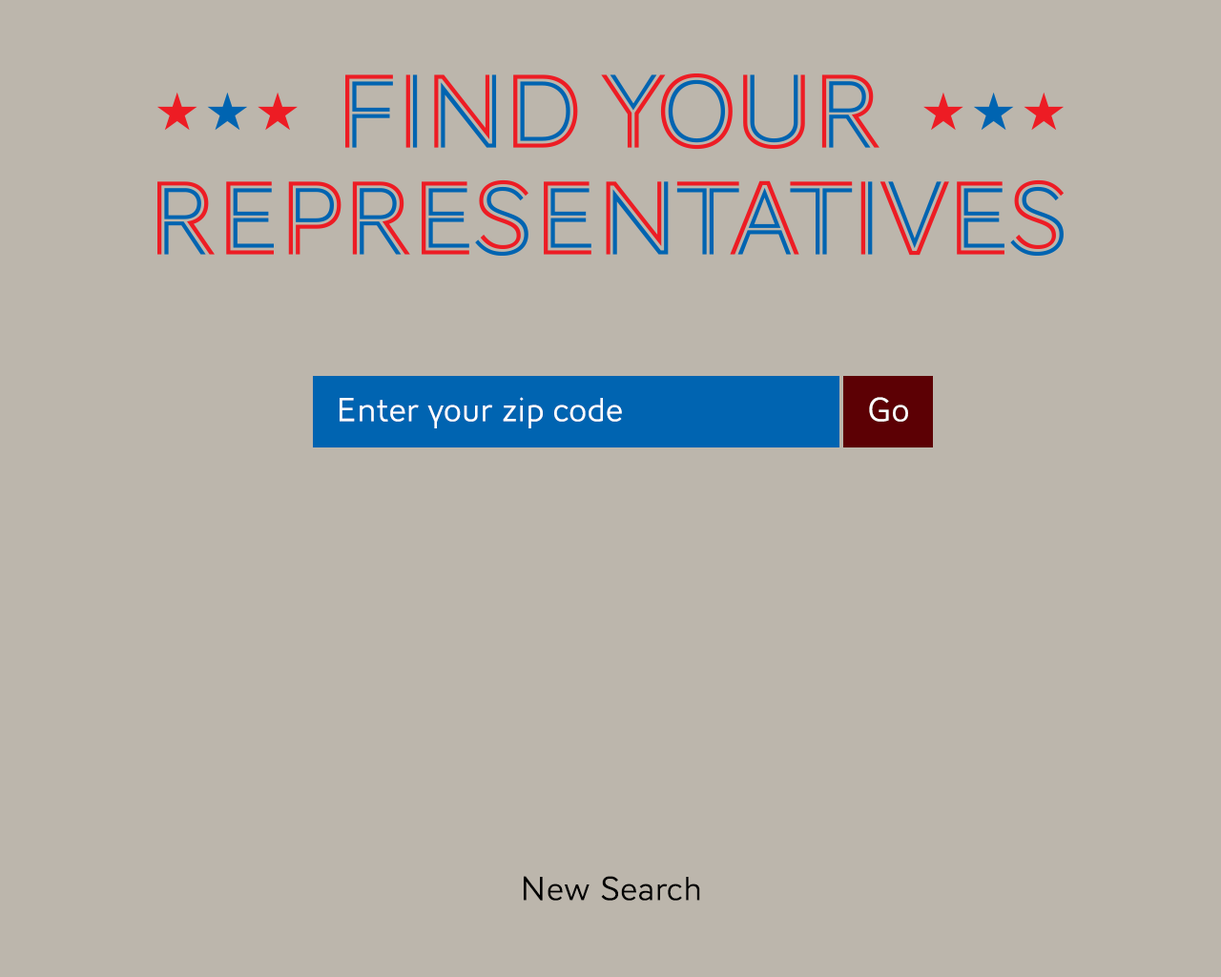
<style>
.page{position:relative;width:1221px;height:977px;background:#bcb6ac}
.page>*{position:absolute;margin:0}
.t1{font:34.3px "AWConquerorSans-Light";color:#ffffff}
.t2{font:34.3px "AWConquerorSans-Light";color:#000000}
</style>
<div class="page">
<p class="t1" style="left:340px;top:397px;width:282px;height:31px">Enter your zip code</p>
<p class="t1" style="left:869px;top:397px;width:39px;height:25px">Go</p>
<p class="t2" style="left:524px;top:876px;width:176px;height:24px">New Search</p>
</div>
